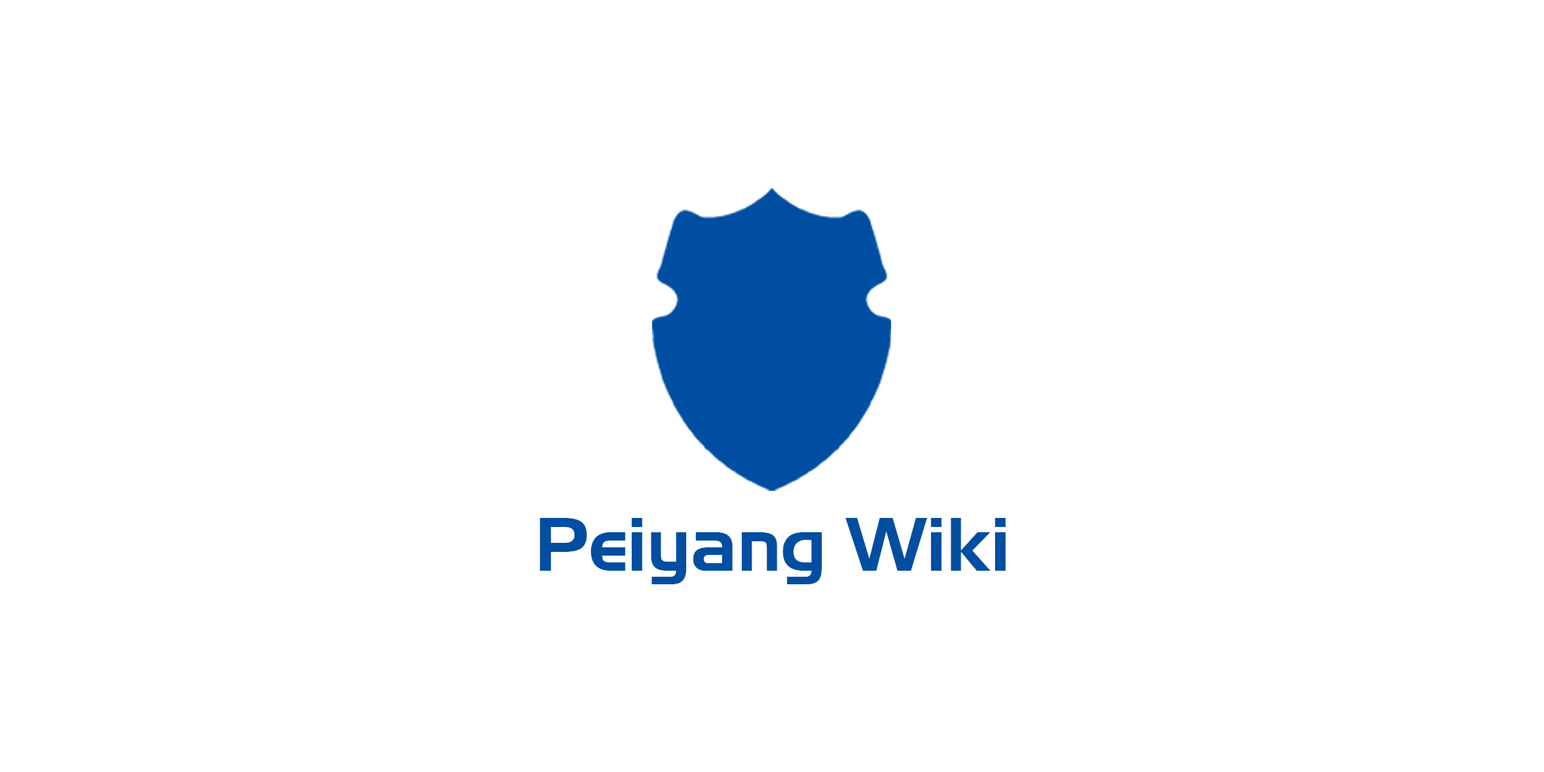
<style>
.page{position:relative;width:1544px;height:772px;background:#ffffff}
.page>*{position:absolute;margin:0}
.t1{font:73.2px "AeroRegularSWFTE";color:#004ea2}
</style>
<div class="page">
<p class="t1" style="left:540px;top:518px;width:466px;height:66px">Peiyang Wiki</p>
</div>
